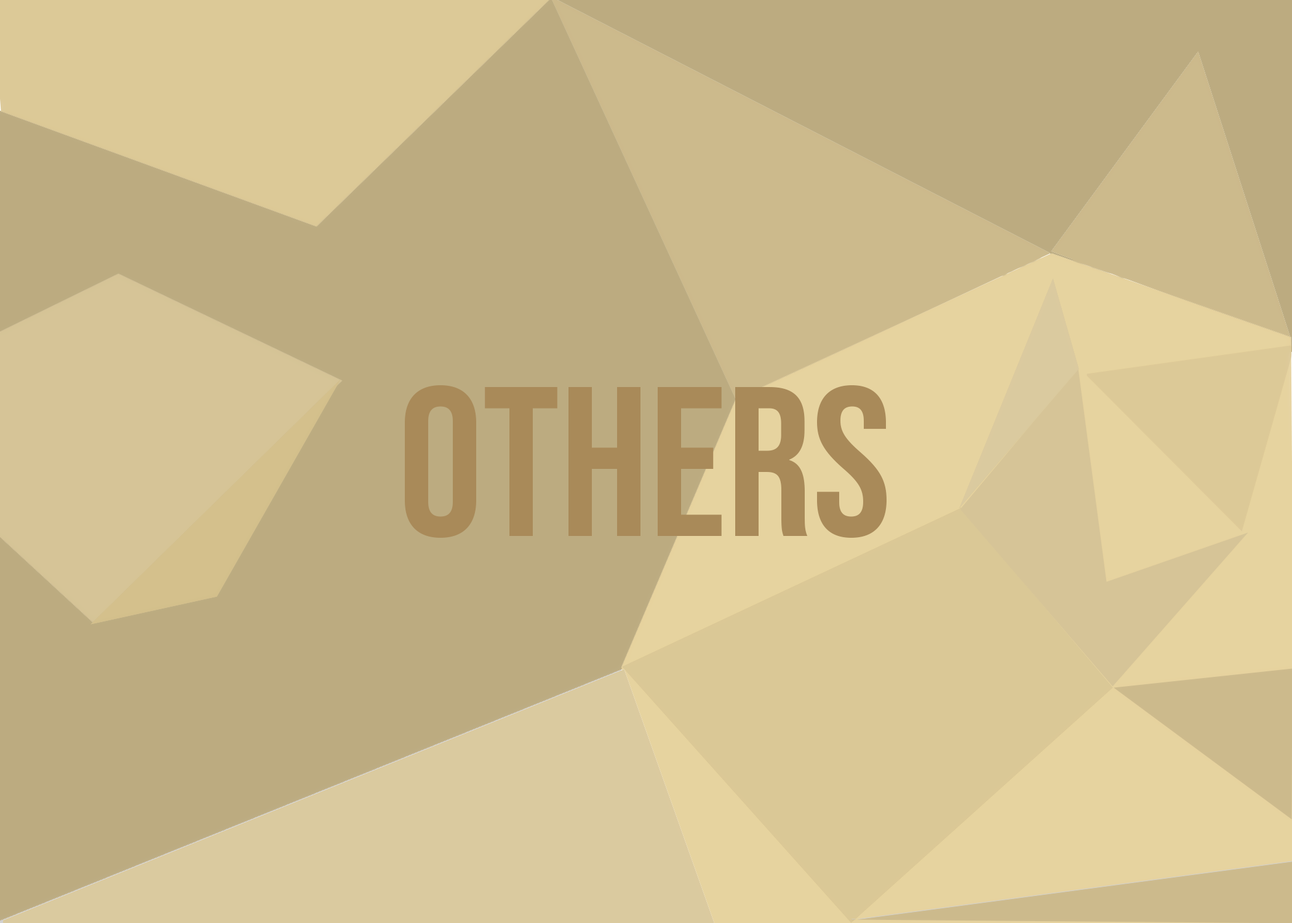
<style>
.page{position:relative;width:1292px;height:923px;background:#bcab80}
.page>*{position:absolute;margin:0}
.t1{font:212.8px "BebasNeue-Regular";color:#a98a59}
</style>
<div class="page">
<p class="t1" style="left:405px;top:385px;width:482px;height:153px">Others</p>
</div>
